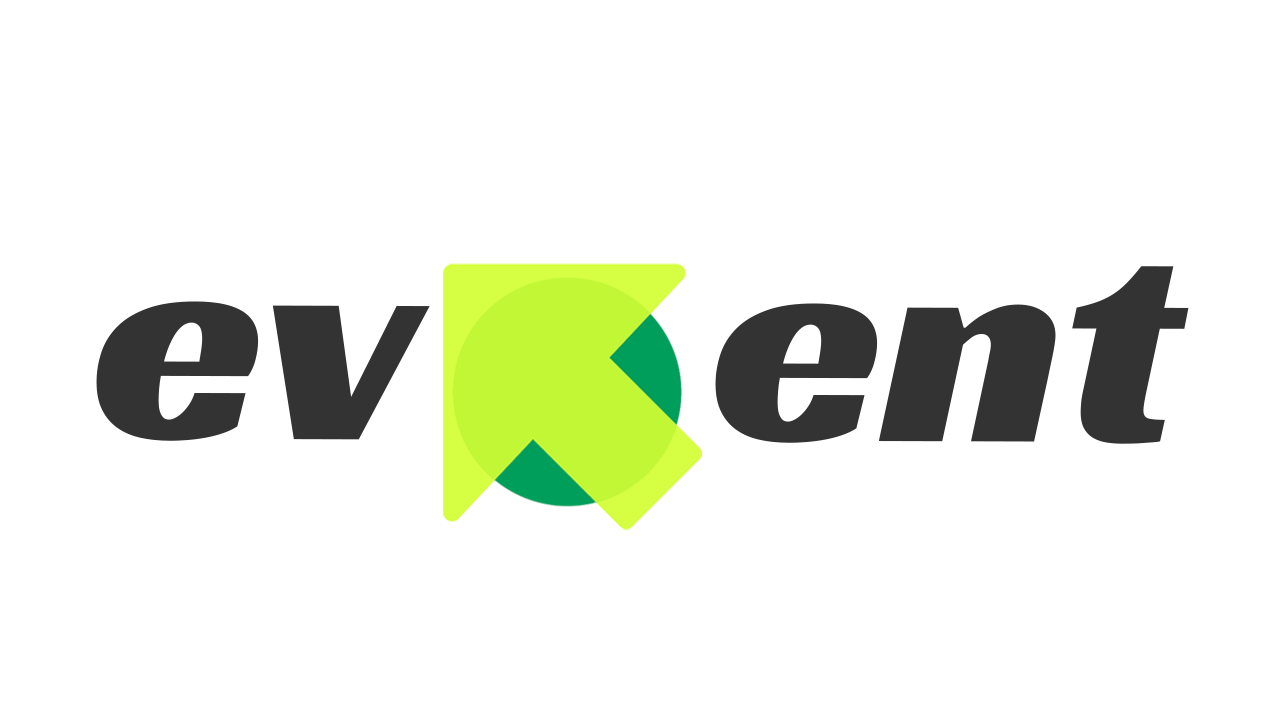
<style>
.page{position:relative;width:1280px;height:720px;background:#ffffff}
.page>*{position:absolute;margin:0}
.t1{font:310.3px "RacingSansOne-Regular";color:#333333}
</style>
<div class="page">
<p class="t1" style="left:96px;top:266px;width:1093px;height:178px">ev     ent</p>
</div>
